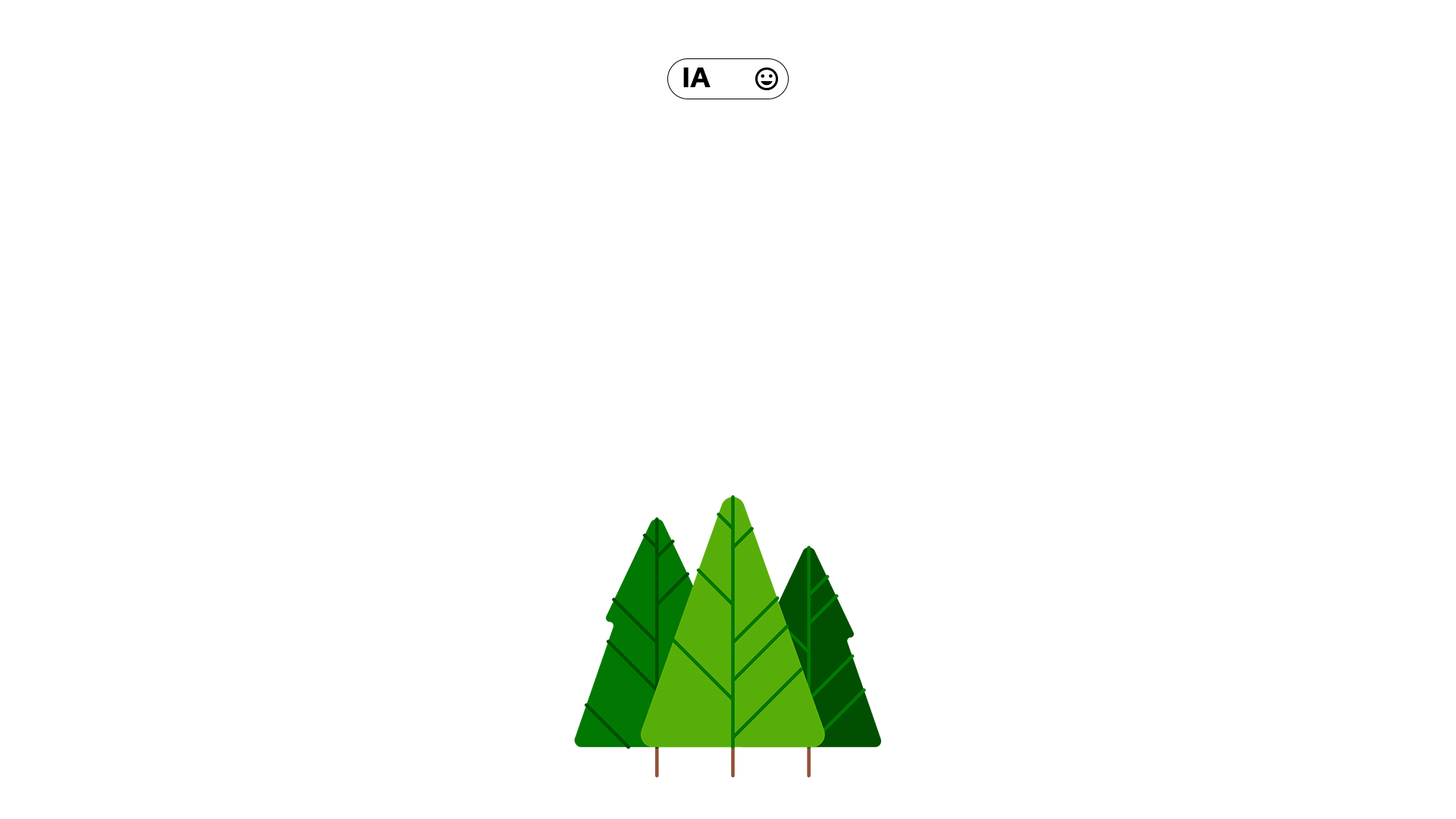
<style>
.page{position:relative;width:1456px;height:819px;background:#ffffff}
.page>*{position:absolute;margin:0}
.t1{font:28.3px "RedHatText-Bold";color:#000000;scale:0.97 1}
</style>
<div class="page">
<p class="t1" style="left:683px;top:67px;width:28px;height:20px">IA</p>
</div>
